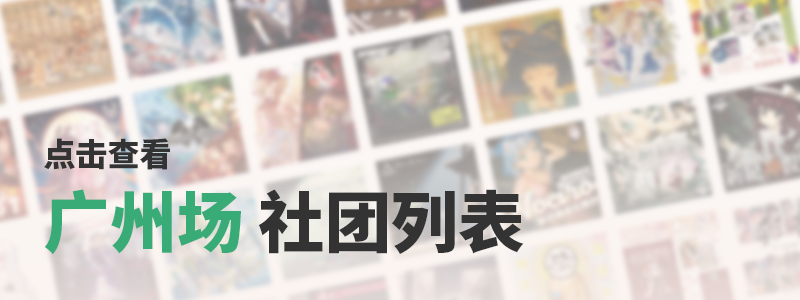
<style>
.page{position:relative;width:800px;height:300px}
.page>*{position:absolute;margin:0}
.t1{font:31.9px/50.7px "SourceHanSansSC-Heavy";color:#333333}
.t2{font:66.5px/50.7px "SourceHanSansSC-Heavy";color:#38ab76}
.t3{font:66.5px/50.7px "SourceHanSansSC-Heavy";color:#333333}
</style>
<div class="page">
<p class="t1" style="left:44px;top:138px;width:480px;height:117px">点击查看<br><span class="t2">广州场 </span><span class="t3">社团列表</span></p>
</div>
